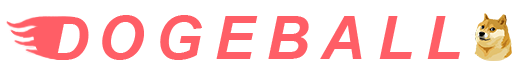
<style>
.page{position:relative;width:530px;height:80px;background:#ffffff}
.page>*{position:absolute;margin:0}
.t1{font:60px "Arial-BoldItalicMT";letter-spacing:0.2em;color:#ff5e66}
</style>
<div class="page">
<p class="t1" style="left:102px;top:15px;width:358px;height:45px">OGEBALL</p>
</div>
